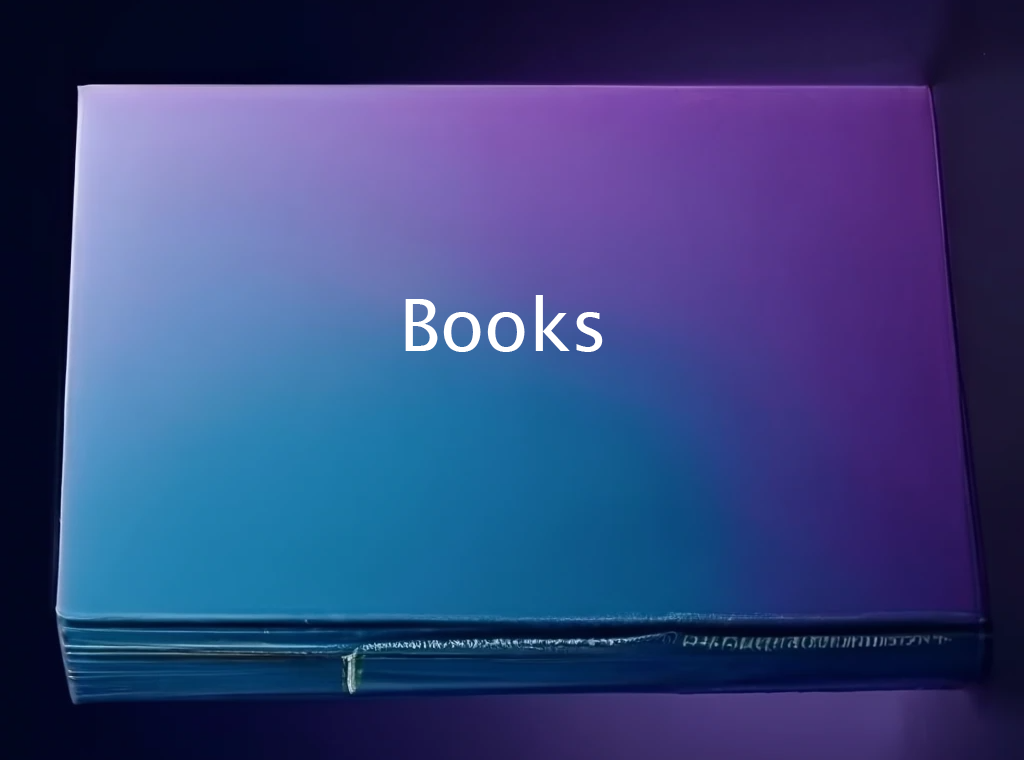
<style>
.page{position:relative;width:1024px;height:760px}
.page>*{position:absolute;margin:0}
.t1{font:72px "LucidaSans";color:#ffffff}
</style>
<div class="page">
<p class="t1" style="left:405px;top:295px;width:198px;height:57px">Books</p>
</div>
